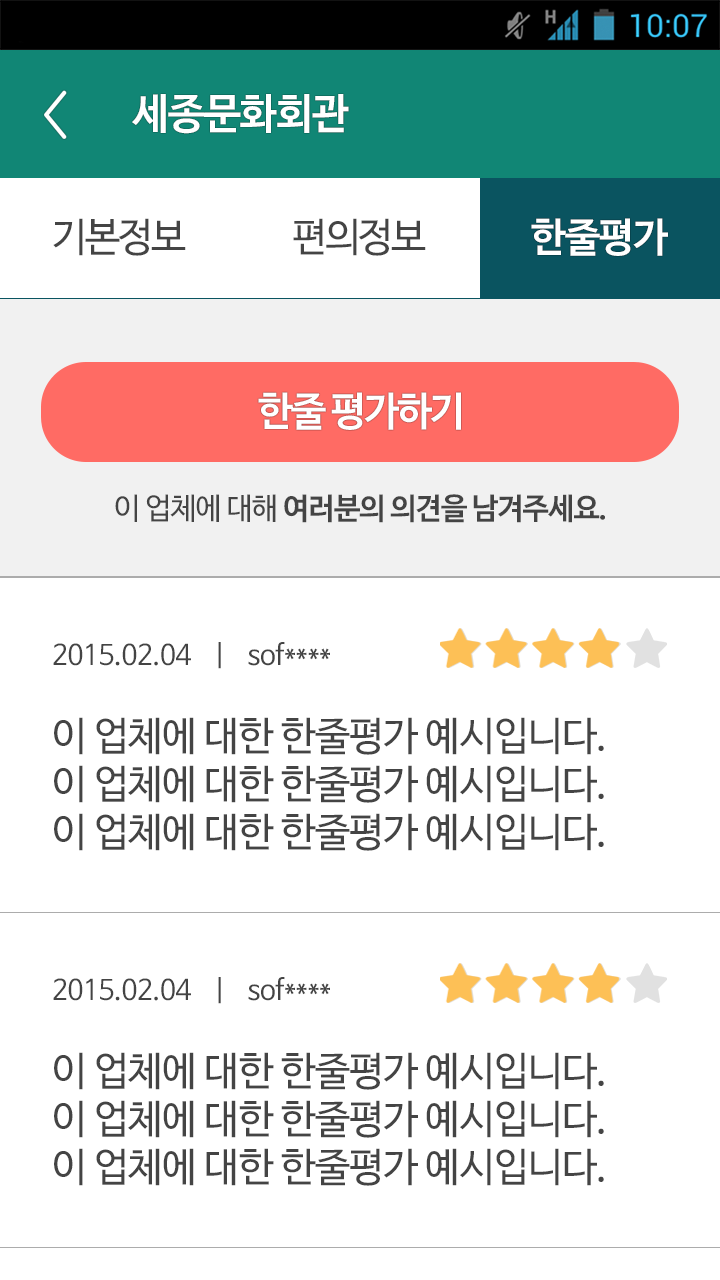
<style>
.page{position:relative;width:720px;height:1280px;background:#ffffff}
.page>*{position:absolute;margin:0}
.t1{font:42px "NanumBarunGothicOTFBold";letter-spacing:-0.02em;color:#ffffff}
.t2{font:40px "NanumBarunGothicOTF";letter-spacing:-0.05em;color:#444444}
.t3{font:40px "NanumBarunGothicOTFBold";letter-spacing:-0.02em;color:#ffffff}
.t4{font:40px "NanumBarunGothicOTFBold";letter-spacing:-0.05em;color:#ffffff}
.t5{font:30px "NanumBarunGothicOTFBold";letter-spacing:-0.03em;color:#444444}
.t6{font:30px "NanumBarunGothicOTF";letter-spacing:-0.03em;color:#444444}
.t7{font:28px "NanumBarunGothicOTF";letter-spacing:-0.02em;color:#444444}
.t8{font:40px "NanumBarunGothicOTF";letter-spacing:-0.02em;color:#444444}
</style>
<div class="page">
<p class="t1" style="left:132px;top:94px;width:217px;height:40px">세종문화회관</p>
<p class="t2" style="left:53px;top:218px;width:133px;height:38px">기본정보</p>
<p class="t2" style="left:293px;top:218px;width:133px;height:38px">편의정보</p>
<p class="t3" style="left:531px;top:218px;width:137px;height:38px">한줄평가</p>
<p class="t4" style="left:258px;top:392px;width:203px;height:38px">한줄 평가하기</p>
<p class="t5" style="left:115px;top:494px;width:490px;height:29px"><span class="t6">이 업체에 대해 </span>여러분의 의견을 남겨주세요.</p>
<p class="t7" style="left:53px;top:642px;width:277px;height:27px">2015.02.04    |    sof****</p>
<p class="t8" style="left:54px;top:717px;width:550px;height:134px">이 업체에 대한 한줄평가 예시입니다.<br>이 업체에 대한 한줄평가 예시입니다.<br>이 업체에 대한 한줄평가 예시입니다.</p>
<p class="t7" style="left:53px;top:977px;width:277px;height:27px">2015.02.04    |    sof****</p>
<p class="t8" style="left:54px;top:1052px;width:550px;height:134px">이 업체에 대한 한줄평가 예시입니다.<br>이 업체에 대한 한줄평가 예시입니다.<br>이 업체에 대한 한줄평가 예시입니다.</p>
</div>
